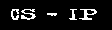
<style>
.page{position:relative;width:112px;height:30px;background:#000000}
.page>*{position:absolute;margin:0}
.t1{font:16.6px "Facelift";color:#ffffff;font-weight:bold}
</style>
<div class="page">
<p class="t1" style="left:11px;top:9px;width:86px;height:11px">Cs - iP</p>
</div>
